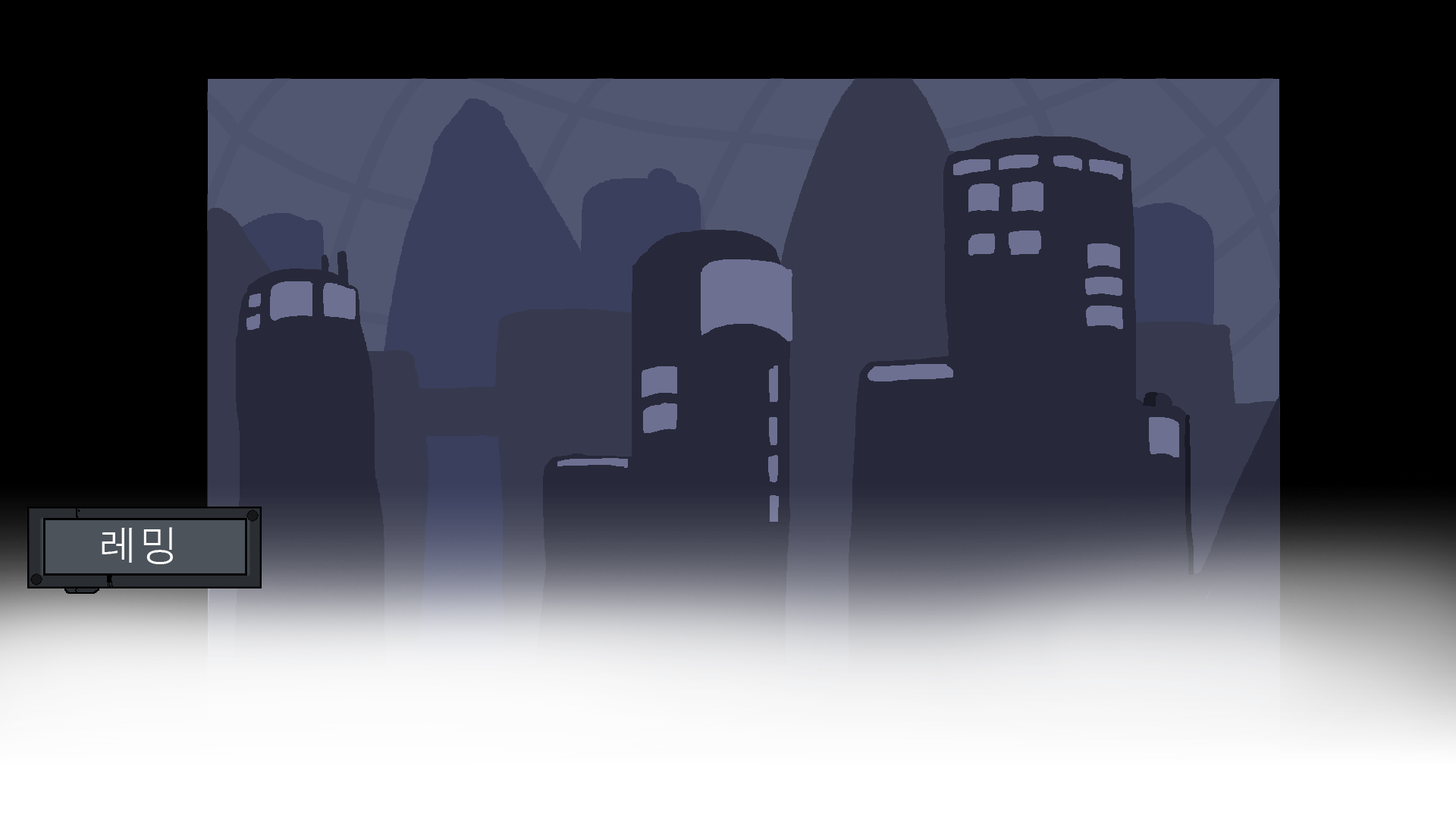
<style>
.page{position:relative;width:1456px;height:819px;background:#000000}
.page>*{position:absolute;margin:0}
.t1{font:41.3px "Dotum";color:#ffffff}
</style>
<div class="page">
<p class="t1" style="left:102px;top:527px;width:71px;height:37px">레밍</p>
</div>
